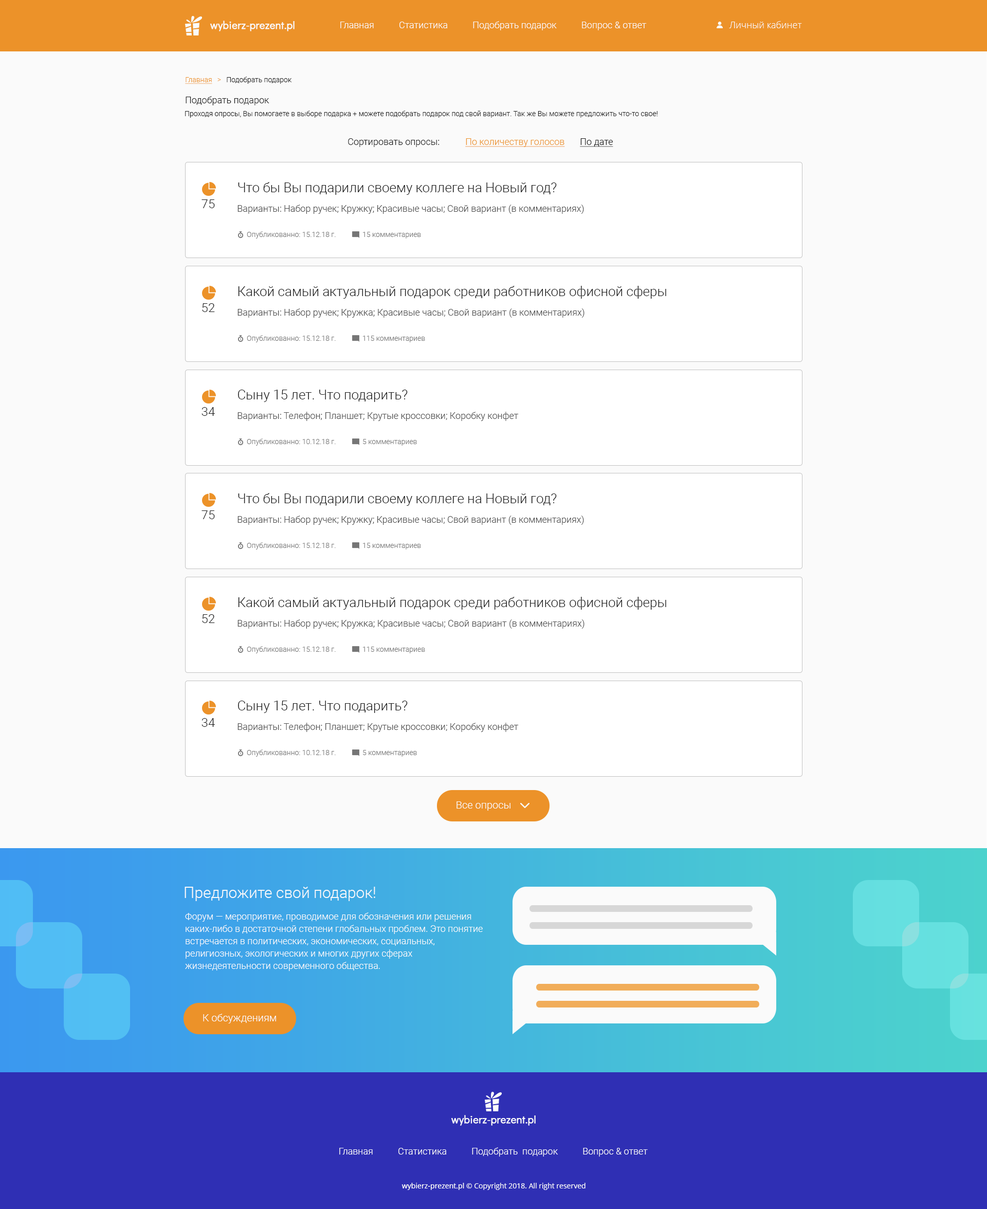
<style>
.page{position:relative;width:987px;height:1209px;background:#fafafa}
.page>*{position:absolute;margin:0}
.t1{font:10.3px "DidactGothic-Regular";color:#fafafa;font-weight:bold}
.t2{font:9.2px "Roboto-Light";color:#fafafa}
.t3{font:9.2px "OpenSans-Light";color:#fafafa}
.t4{font:7.2px "Roboto-Light";color:#1b1b1b}
.t5{font:7.2px "Roboto-Light";color:#ec9229;text-decoration:underline}
.t6{font:7.2px "Roboto-Light";color:#ec9229}
.t7{font:9.2px "Roboto-Light";color:#191919}
.t8{font:7.2px "Roboto-Light";color:#191919}
.t9{font:9.2px "Roboto-Light";color:#ec9229;text-decoration:underline}
.t10{font:9.2px "Roboto-Light";color:#191919;text-decoration:underline}
.t11{font:13.4px "Roboto-Light";color:#191919}
.t12{font:12.3px "Roboto-Light";color:#191919}
.t13{font:9.2px "Roboto-Light";color:#4c4c4c}
.t14{font:7.2px "Roboto-Light";color:#767676}
.t15{font:10.3px "Roboto-Light";color:#fafafa}
.t16{font:15.4px "Roboto-Light";color:#fafafa}
.t17{font:9.2px/12.3px "Roboto-Light";color:#fafafa}
.t18{font:7.2px "OpenSans-Regular";color:#fafafa}
.t19{font:7.2px "NotoSans";color:#fafafa}
</style>
<div class="page">
<p class="t1" style="left:210px;top:21px;width:84px;height:10px">wybierz-prezent.pl</p>
<p class="t2" style="left:340px;top:21px;width:306px;height:9px">Главная           Статистика           Подобрать подарок           Вопрос &amp; ответ</p>
<p class="t3" style="left:729px;top:21px;width:73px;height:7px">Личный кабинет</p>
<p class="t4" style="left:185px;top:77px;width:107px;height:7px"><span class="t5">Главная   </span><span class="t6">&gt;   </span>Подобрать подарок</p>
<p class="t7" style="left:186px;top:96px;width:83px;height:9px">Подобрать подарок</p>
<p class="t8" style="left:185px;top:110px;width:472px;height:8px">Проходя опросы, Вы помогаете в выборе подарка + можете подобрать подарок под свой вариант. Так же Вы можете предложить что-то свое!</p>
<p class="t7" style="left:348px;top:138px;width:91px;height:9px">Сортировать опросы:</p>
<p class="t9" style="left:465px;top:138px;width:100px;height:9px">По количеству голосов</p>
<p class="t10" style="left:580px;top:138px;width:33px;height:9px">По дате</p>
<p class="t11" style="left:238px;top:182px;width:319px;height:13px">Что бы Вы подарили своему коллеге на Новый год?</p>
<p class="t12" style="left:201px;top:199px;width:14px;height:9px">75</p>
<p class="t13" style="left:237px;top:205px;width:347px;height:9px">Варианты: Набор ручек; Кружку; Красивые часы; Свой вариант (в комментариях)</p>
<p class="t14" style="left:247px;top:231px;width:89px;height:7px">Опубликованно: 15.12.18 г.</p>
<p class="t14" style="left:363px;top:232px;width:58px;height:6px">15 комментариев</p>
<p class="t11" style="left:238px;top:286px;width:428px;height:13px">Какой самый актуальный подарок среди работников офисной сферы</p>
<p class="t12" style="left:202px;top:303px;width:13px;height:9px">52</p>
<p class="t13" style="left:237px;top:308px;width:347px;height:10px">Варианты: Набор ручек; Кружка; Красивые часы; Свой вариант (в комментариях)</p>
<p class="t14" style="left:247px;top:335px;width:89px;height:7px">Опубликованно: 15.12.18 г.</p>
<p class="t14" style="left:363px;top:336px;width:62px;height:6px">115 комментариев</p>
<p class="t11" style="left:238px;top:390px;width:169px;height:12px">Сыну 15 лет. Что подарить?</p>
<p class="t12" style="left:201px;top:407px;width:14px;height:9px">34</p>
<p class="t13" style="left:237px;top:412px;width:281px;height:9px">Варианты: Телефон; Планшет; Крутые кроссовки; Коробку конфет</p>
<p class="t14" style="left:247px;top:438px;width:89px;height:8px">Опубликованно: 10.12.18 г.</p>
<p class="t14" style="left:363px;top:439px;width:54px;height:7px">5 комментариев</p>
<p class="t11" style="left:238px;top:493px;width:319px;height:13px">Что бы Вы подарили своему коллеге на Новый год?</p>
<p class="t12" style="left:201px;top:510px;width:14px;height:9px">75</p>
<p class="t13" style="left:237px;top:515px;width:347px;height:10px">Варианты: Набор ручек; Кружку; Красивые часы; Свой вариант (в комментариях)</p>
<p class="t14" style="left:247px;top:542px;width:89px;height:7px">Опубликованно: 15.12.18 г.</p>
<p class="t14" style="left:363px;top:543px;width:58px;height:6px">15 комментариев</p>
<p class="t11" style="left:238px;top:597px;width:428px;height:12px">Какой самый актуальный подарок среди работников офисной сферы</p>
<p class="t12" style="left:202px;top:614px;width:13px;height:9px">52</p>
<p class="t13" style="left:237px;top:619px;width:347px;height:9px">Варианты: Набор ручек; Кружка; Красивые часы; Свой вариант (в комментариях)</p>
<p class="t14" style="left:247px;top:646px;width:89px;height:7px">Опубликованно: 15.12.18 г.</p>
<p class="t14" style="left:363px;top:646px;width:62px;height:7px">115 комментариев</p>
<p class="t11" style="left:238px;top:700px;width:169px;height:13px">Сыну 15 лет. Что подарить?</p>
<p class="t12" style="left:201px;top:718px;width:14px;height:9px">34</p>
<p class="t13" style="left:237px;top:722px;width:281px;height:10px">Варианты: Телефон; Планшет; Крутые кроссовки; Коробку конфет</p>
<p class="t14" style="left:247px;top:749px;width:89px;height:7px">Опубликованно: 10.12.18 г.</p>
<p class="t14" style="left:363px;top:750px;width:54px;height:6px">5 комментариев</p>
<p class="t15" style="left:456px;top:801px;width:54px;height:9px">Все опросы</p>
<p class="t16" style="left:184px;top:886px;width:191px;height:15px">Предложите свой подарок!</p>
<p class="t17" style="left:185px;top:912px;width:298px;height:59px;text-align:right">Форум — мероприятие, проводимое для обозначения или решения каких-либо в достаточной степени глобальных проблем. Это понятие встречается в политических, экономических, социальных, религиозных, экологических и многих других сферах жизнедеятельности современного общества.</p>
<p class="t15" style="left:203px;top:1013px;width:73px;height:10px">К обсуждениям</p>
<p class="t1" style="left:451px;top:1115px;width:84px;height:10px">wybierz-prezent.pl</p>
<p class="t2" style="left:339px;top:1147px;width:308px;height:9px">Главная           Статистика           Подобрать  подарок           Вопрос &amp; ответ</p>
<p class="t18" style="left:401px;top:1182px;width:184px;height:8px"><span class="t19">wybierz-prezent.pl </span>© Copyright 2018. All right reserved</p>
</div>
